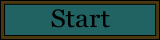
<style>
.page{position:relative;width:160px;height:40px;background:#216363}
.page>*{position:absolute;margin:0}
.t1{font:25px "Vani";color:#000000;scale:1.1 1}
</style>
<div class="page">
<p class="t1" style="left:51px;top:9px;width:59px;height:19px">Start</p>
</div>
